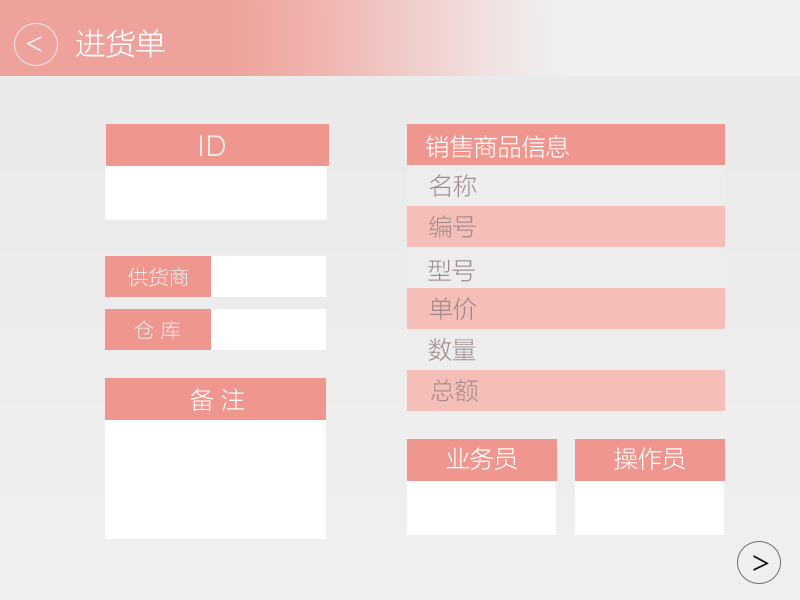
<style>
.page{position:relative;width:800px;height:600px}
.page>*{position:absolute;margin:0}
.t1{font:30px "MicrosoftYaHeiLight";color:#ffffff}
.t2{font:30px "SofiaProLight";color:#e9e9e9}
.t3{font:24px "MicrosoftYaHeiLight";color:#ffffff}
.t4{font:24px "MicrosoftYaHeiLight";color:#a08989}
.t5{font:20px "MicrosoftYaHeiLight";color:#e9e9e9}
</style>
<div class="page">
<p class="t1" style="left:76px;top:29px;width:89px;height:29px">进货单</p>
<p class="t2" style="left:200px;top:135px;width:25px;height:21px">ID</p>
<p class="t3" style="left:426px;top:135px;width:143px;height:23px">销售商品信息</p>
<p class="t4" style="left:429px;top:174px;width:48px;height:23px">名称</p>
<p class="t4" style="left:429px;top:215px;width:47px;height:23px">编号</p>
<p class="t5" style="left:128px;top:267px;width:61px;height:20px">供货商</p>
<p class="t4" style="left:428px;top:259px;width:47px;height:23px">型号</p>
<p class="t4" style="left:429px;top:297px;width:48px;height:23px">单价</p>
<p class="t5" style="left:134px;top:320px;width:46px;height:20px">仓 库</p>
<p class="t4" style="left:428px;top:338px;width:48px;height:23px">数量</p>
<p class="t3" style="left:190px;top:388px;width:55px;height:23px">备 注</p>
<p class="t4" style="left:431px;top:379px;width:47px;height:23px">总额</p>
<p class="t3" style="left:446px;top:447px;width:71px;height:23px">业务员</p>
<p class="t3" style="left:614px;top:447px;width:71px;height:23px">操作员</p>
</div>
